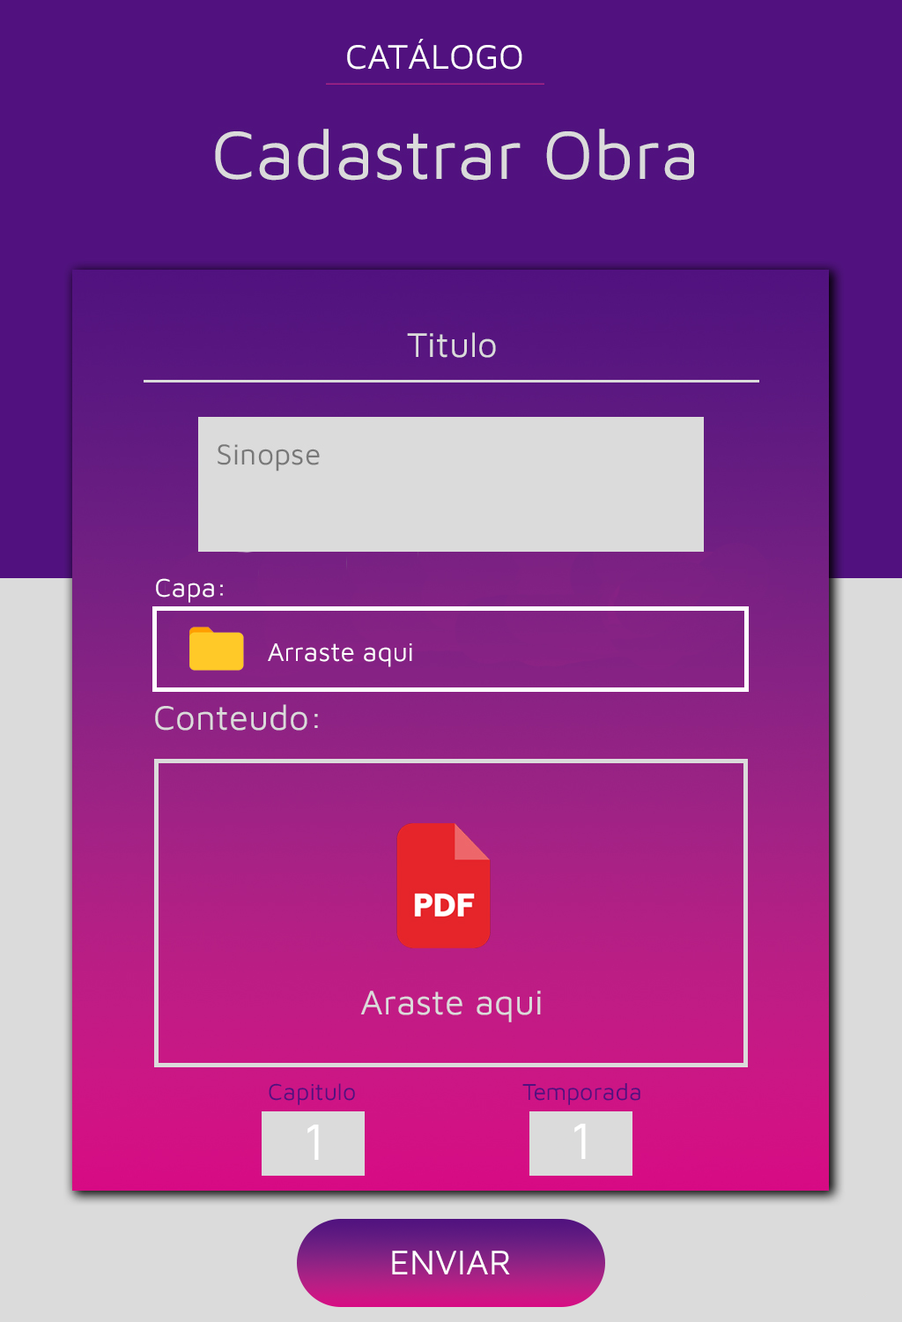
<style>
.page{position:relative;width:902px;height:1322px;background:#51117f}
.page>*{position:absolute;margin:0}
.t1{font:35.2px "MavenPro-Regular";color:#ffffff}
.t2{font:26.4px "MavenPro-Regular";color:#ffffff}
.t3{font:23.7px "MavenPro-Regular";color:#51117f}
.t4{font:52.9px "MavenPro-Regular";color:#ffffff}
</style>
<div class="page">
<p class="t1" style="left:347px;top:39px;width:175px;height:31px">CATÁLOGO</p>
<p class="t2" style="left:156px;top:578px;width:67px;height:25px">Capa:</p>
<p class="t2" style="left:268px;top:643px;width:144px;height:24px">Arraste aqui</p>
<p class="t3" style="left:269px;top:1083px;width:86px;height:22px">Capitulo</p>
<p class="t3" style="left:522px;top:1083px;width:119px;height:22px">Temporada</p>
<p class="t4" style="left:308px;top:1124px;width:11px;height:36px">1</p>
<p class="t4" style="left:574px;top:1123px;width:12px;height:36px">1</p>
<p class="t1" style="left:392px;top:1250px;width:118px;height:24px">ENVIAR</p>
</div>
